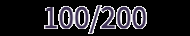
<style>
.page{position:relative;width:190px;height:36px;background:#000000}
.page>*{position:absolute;margin:0}
.t1{font:28px "WebPSD-18463539-0-Regular";color:#3f3254;font-weight:bold}
</style>
<div class="page">
<p class="t1" style="left:0px;top:0px;width:190px;height:36px">100/200</p>
</div>
